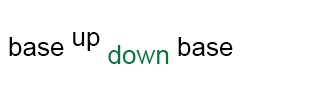
<style>
.page{position:relative;width:320px;height:96px;background:#ffffff}
.page>*{position:absolute;margin:0}
.t1{font:26px "ArialMT";color:#000000}
.t2{font:26px "ArialMT";color:#00783c}
</style>
<div class="page">
<p class="t1" style="left:9px;top:32px;width:224px;height:32px">base up <span class="t2">down</span> base</p>
</div>
